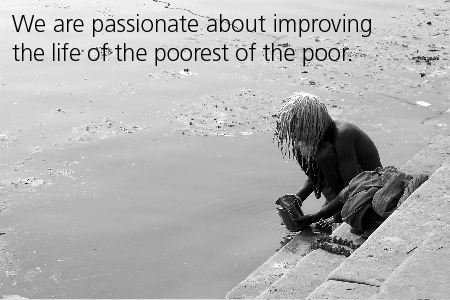
<style>
.page{position:relative;width:450px;height:300px}
.page>*{position:absolute;margin:0}
.t1{font:24px "Frutiger-Light";letter-spacing:-0.01em;color:#000000}
.t2{font:24px/14px "Frutiger-Light";color:#000000}
</style>
<div class="page">
<p class="t1" style="left:12px;top:14px;width:359px;height:52px"><span class="t2">We are passionate about </span>improving <br>the life of the poorest of the poor.</p>
</div>
